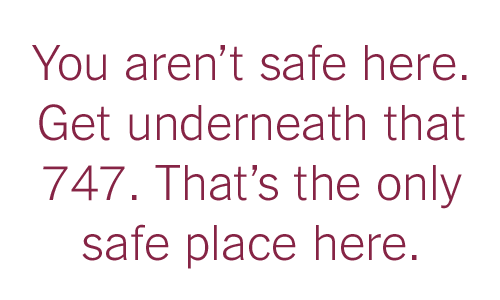
<style>
.page{position:relative;width:500px;height:300px;background:#ffffff}
.page>*{position:absolute;margin:0}
.t1{font:50px "NYTFranklin-Light";color:#862445}
</style>
<div class="page">
<p class="t1" style="left:32px;top:44px;width:435px;height:225px;text-align:center">You aren’t safe here. Get underneath that 747. That’s the only safe place here.</p>
</div>
